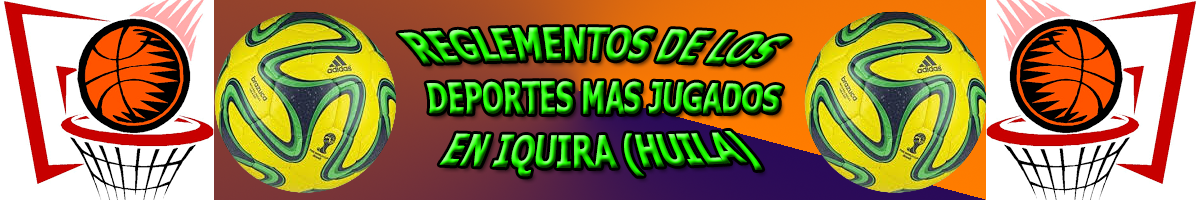
<style>
.page{position:relative;width:1200px;height:200px}
.page>*{position:absolute;margin:0}
.t1{font:36px "Tahoma-Bold"}
.t2{font:30px "Tahoma"}
</style>
<div class="page">
<p class="t1" style="left:398px;top:27px;width:392px;height:150px"><span class="t2">           </span>REGLEMENTOS DE LOS <br>         DEPORTES MAS JUGADOS <br>             EN IQUIRA (HUILA)</p>
</div>
